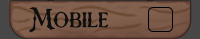
<style>
.page{position:relative;width:200px;height:39px}
.page>*{position:absolute;margin:0}
.t1{font:25.7px "RoseKnight-Regular";color:#0e0f0f}
</style>
<div class="page">
<p class="t1" style="left:29px;top:7px;width:79px;height:26px">Mobile</p>
</div>
